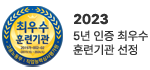
<style>
.page{position:relative;width:150px;height:70px;background:#ffffff}
.page>*{position:absolute;margin:0}
.t1{font:14px "Pretendard-Bold";color:#333333}
.t2{font:12px/14px "Pretendard-Regular";color:#333333}
</style>
<div class="page">
<p class="t1" style="left:74px;top:13px;width:34px;height:12px">2023</p>
<p class="t2" style="left:73px;top:30px;width:75px;height:25px">5년 인증 최우수<br>훈련기관 선정</p>
</div>
